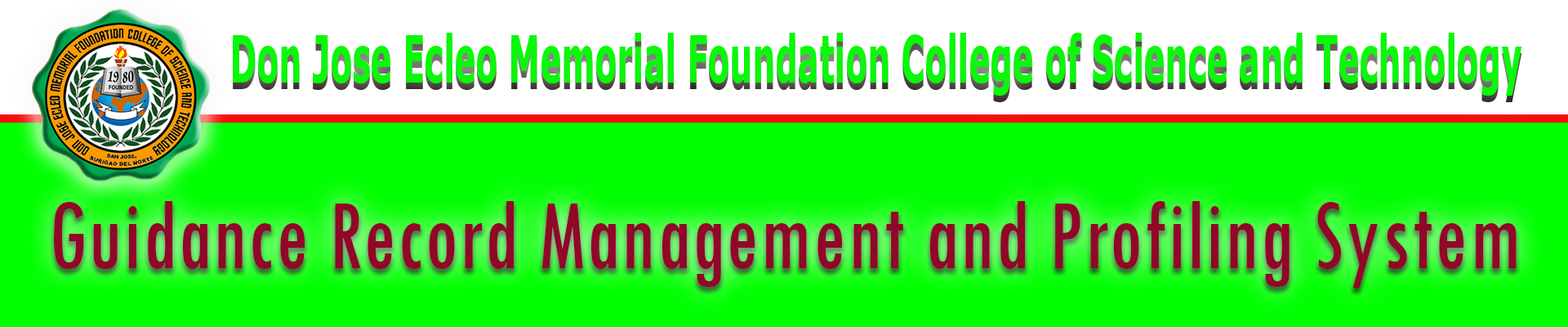
<style>
.page{position:relative;width:1568px;height:327px;background:#00ff00}
.page>*{position:absolute;margin:0}
.t1{font:65.3px "Tahoma-Bold";letter-spacing:0.02em;color:#0af80a;scale:0.53 1}
.t2{font:104px "TwCenMT-Condensed";letter-spacing:0.02em;color:#910728;scale:0.88 1}
</style>
<div class="page">
<p class="t1" style="left:233px;top:33px;width:1289px;height:63px">Don Jose Ecleo Memorial Foundation College of Science and Technology</p>
<p class="t2" style="left:54px;top:201px;width:1463px;height:86px">Guidance Record Management and Profiling System</p>
</div>
